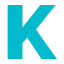
<style>
.page{position:relative;width:64px;height:64px;background:#ffffff}
.page>*{position:absolute;margin:0}
.t1{font:76.2px "Raleway-Heavy";letter-spacing:-0.01em;color:#01bacc}
</style>
<div class="page">
<p class="t1" style="left:7px;top:5px;width:50px;height:54px">K</p>
</div>
